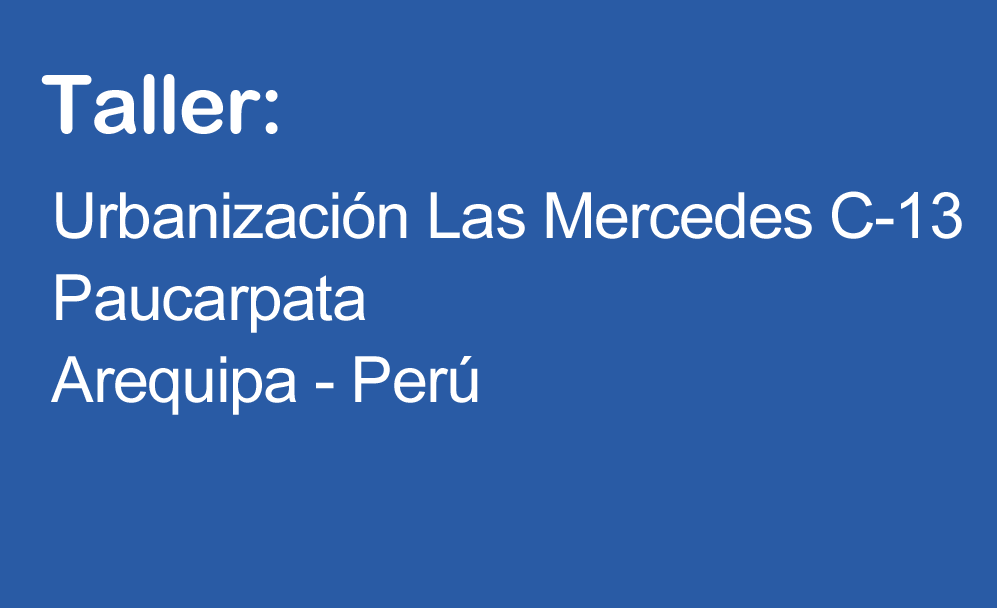
<style>
.page{position:relative;width:997px;height:608px;background:#295ba5}
.page>*{position:absolute;margin:0}
.t1{font:81px "ArialRoundedMTBold";letter-spacing:-0.022em;color:#ffffff}
.t2{font:63.6px/81.8px "ArialMT";letter-spacing:-0.022em;color:#ffffff}
</style>
<div class="page">
<p class="t1" style="left:41px;top:74px;width:237px;height:60px">Taller:</p>
<p class="t2" style="left:51px;top:191px;width:911px;height:224px">Urbanización Las Mercedes C-13<br>Paucarpata<br>Arequipa - Perú</p>
</div>
